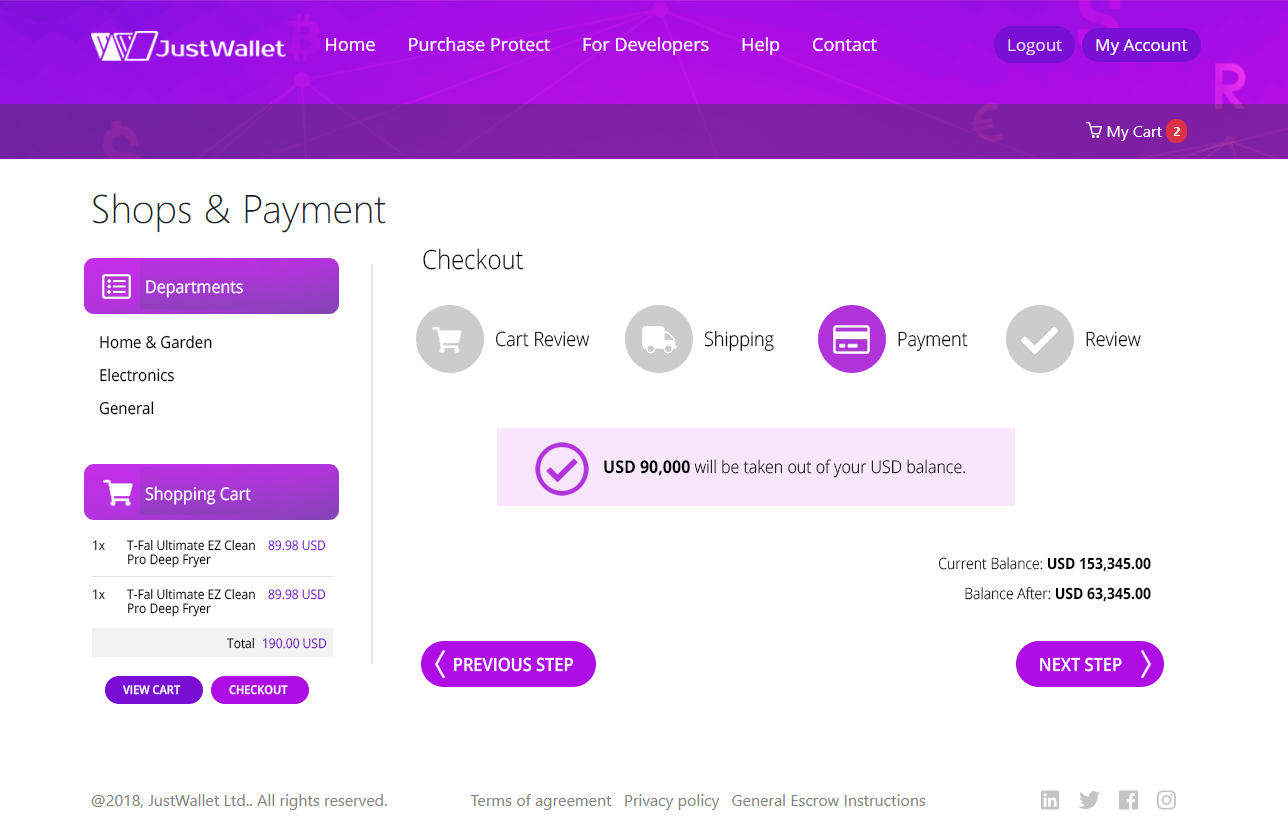
<style>
.page{position:relative;width:1288px;height:827px;background:#ffffff}
.page>*{position:absolute;margin:0}
.t1{font:26.4px "OpenSans-Light";color:#000000;scale:0.91 1}
.t2{font:17.6px "OpenSans";color:#ffffff;scale:0.91 1}
.t3{font:16.5px/33px "OpenSans";color:#000000;scale:0.91 1}
.t4{font:19.8px "OpenSans-Light";color:#000000;scale:0.91 1}
.t5{font:17.6px "OpenSans-Light";color:#000000;scale:0.91 1}
.t6{font:17.6px "OpenSans-Bold";color:#000000;scale:0.91 1}
.t7{font:13.2px "OpenSans";scale:0.91 1}
.t8{font:13.2px "OpenSans";color:#000000;scale:0.91 1}
.t9{font:13.2px "OpenSans";color:#790fd4;scale:0.91 1}
.t10{font:15.4px/30px "OpenSans-Light";color:#000000;scale:0.91 1}
.t11{font:15.4px/30px "OpenSans-Bold";color:#000000;scale:0.91 1}
.t12{font:13.2px "OpenSans";color:#730ec9;scale:0.91 1}
.t13{font:18.2px "OpenSans-Semibold";color:#ffffff;text-transform:uppercase;scale:0.9 1}
.t14{font:12.1px "OpenSans-Semibold";color:#ffffff;text-transform:uppercase;scale:0.91 1}
</style>
<div class="page">
<p class="t1" style="left:423px;top:248px;width:101px;height:22px">Checkout</p>
<p class="t2" style="left:146px;top:280px;width:97px;height:18px">Departments</p>
<p class="t3" style="left:99px;top:335px;width:113px;height:80px">Home &amp; Garden<br>Electronics<br>General</p>
<p class="t4" style="left:496px;top:331px;width:94px;height:16px">Cart Review</p>
<p class="t4" style="left:704px;top:330px;width:70px;height:21px">Shipping</p>
<p class="t4" style="left:898px;top:331px;width:70px;height:20px">Payment</p>
<p class="t4" style="left:1086px;top:331px;width:55px;height:16px">Review</p>
<p class="t5" style="left:604px;top:459px;width:361px;height:19px"><span class="t6">USD 90,000 </span>will be taken out of your USD balance.</p>
<p class="t2" style="left:145px;top:486px;width:106px;height:19px">Shopping Cart</p>
<p class="t7" style="left:93px;top:540px;width:12px;height:11px">1x</p>
<p class="t8" style="left:127px;top:539px;width:128px;height:29px">T-Fal Ultimate EZ Clean <br>Pro Deep Fryer</p>
<p class="t9" style="left:268px;top:540px;width:58px;height:11px">89.98 USD</p>
<p class="t10" style="left:939px;top:557px;width:212px;height:45px;text-align:right">Current Balance: <span class="t11">USD 153,345.00<br></span>Balance After: <span class="t11">USD 63,345.00</span></p>
<p class="t7" style="left:93px;top:589px;width:12px;height:11px">1x</p>
<p class="t8" style="left:127px;top:588px;width:128px;height:29px">T-Fal Ultimate EZ Clean <br>Pro Deep Fryer</p>
<p class="t9" style="left:268px;top:589px;width:58px;height:11px">89.98 USD</p>
<p class="t8" style="left:227px;top:637px;width:27px;height:12px">Total</p>
<p class="t12" style="left:263px;top:638px;width:64px;height:11px">190.00 USD</p>
<p class="t13" style="left:454px;top:657px;width:119px;height:15px">Previous Step</p>
<p class="t13" style="left:1040px;top:657px;width:82px;height:15px">Next Step</p>
<p class="t14" style="left:123px;top:685px;width:58px;height:10px">View Cart</p>
<p class="t14" style="left:229px;top:685px;width:59px;height:10px">CHECKOUT</p>
</div>
